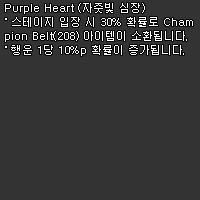
<style>
.page{position:relative;width:200px;height:200px;background:#333333}
.page>*{position:absolute;margin:0}
.t1{font:11px/14px "Dotum";color:#ffffff}
</style>
<div class="page">
<p class="t1" style="left:5px;top:3px;width:188px;height:53px">Purple Heart (자줏빛 심장)<br>˚ 스테이지 입장 시 30% 확률로 Cham<br>pion Belt(208) 아이템이 소환됩니다.<br>˚ 행운 1당 10%p 확률이 증가됩니다.</p>
</div>
